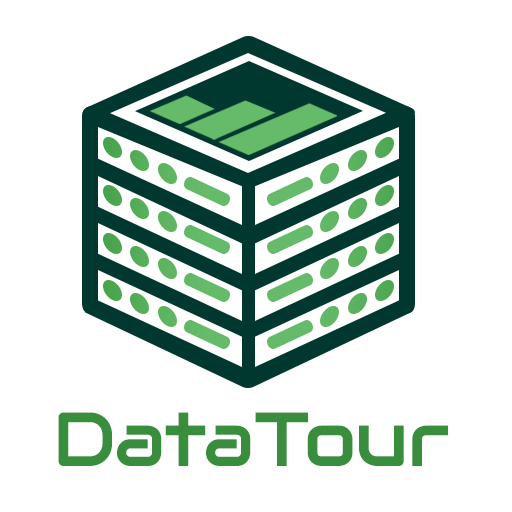
<style>
.page{position:relative;width:512px;height:512px;background:#ffffff}
.page>*{position:absolute;margin:0}
.t1{font:76.5px "Audiowide-Regular";letter-spacing:-0.01em;color:#388e3c}
</style>
<div class="page">
<p class="t1" style="left:58px;top:412px;width:390px;height:54px">DataTour</p>
</div>
